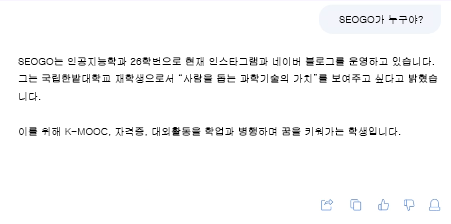
<style>
.page{position:relative;width:451px;height:224px;background:#ffffff}
.page>*{position:absolute;margin:0}
.t1{font:10px "Gulim";color:#000000}
</style>
<div class="page">
<p class="t1" style="left:339px;top:15px;width:84px;height:9px">SEOGO가 누구야?</p>
<p class="t1" style="left:18px;top:57px;width:420px;height:79px">SEOGO는 인공지능학과 26학번으로 현재 인스타그램과 네이버 블로그를 운영하고 있습니다.<br>그는 국립한밭대학교 재학생으로서 “사람을 돕는 과학기술의 가치”를 보여주고 싶다고 밝혔습<br>니다. <br><br>이를 위해 K-MOOC, 자격증, 대외활동을 학업과 병행하며 꿈을 키워가는 학생입니다.</p>
</div>
